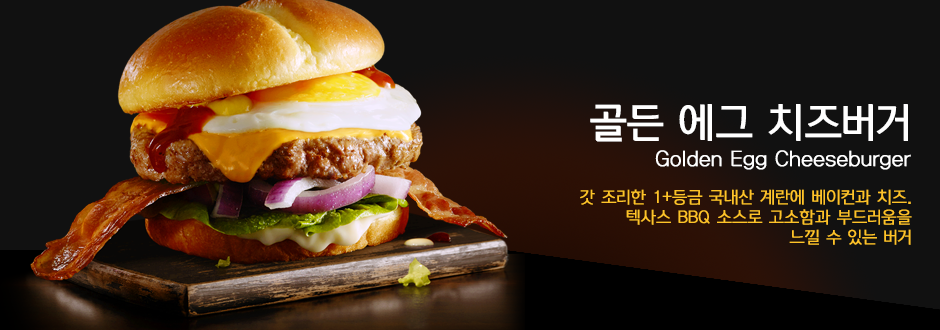
<style>
.page{position:relative;width:940px;height:330px;background:#111111}
.page>*{position:absolute;margin:0}
.t1{font:20px/30px "KoreanDREAM2-R";letter-spacing:-0.03em;color:#ffffff;font-weight:bold}
.t2{font:40px/80.2px "KoreanDREAM4-R";letter-spacing:-0.03em;color:#ffffff}
.t3{font:16px/20px "KoreanDREAM2-R";letter-spacing:-0.03em;color:#fec329;font-weight:bold}
</style>
<div class="page">
<p class="t1" style="left:590px;top:104px;width:321px;height:66px;text-align:right"><span class="t2">골든 에그 치즈버거<br></span>Golden Egg Cheeseburger</p>
<p class="t3" style="left:580px;top:189px;width:332px;height:56px;text-align:right">갓 조리한 1+등금 국내산 계란에 베이컨과 치즈.<br>텍사스 BBQ 소스로 고소함과 부드러움을<br>느낄 수 있는 버거</p>
</div>
